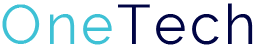
<style>
.page{position:relative;width:256px;height:50px;background:#ffffff}
.page>*{position:absolute;margin:0}
.t1{font:55.6px "Raleway";letter-spacing:0.06em;color:#000444}
.t2{font:55.6px "Raleway";letter-spacing:0.06em;color:#3ec1d5}
</style>
<div class="page">
<p class="t1" style="left:2px;top:3px;width:251px;height:42px"><span class="t2">One</span>Tech</p>
</div>
